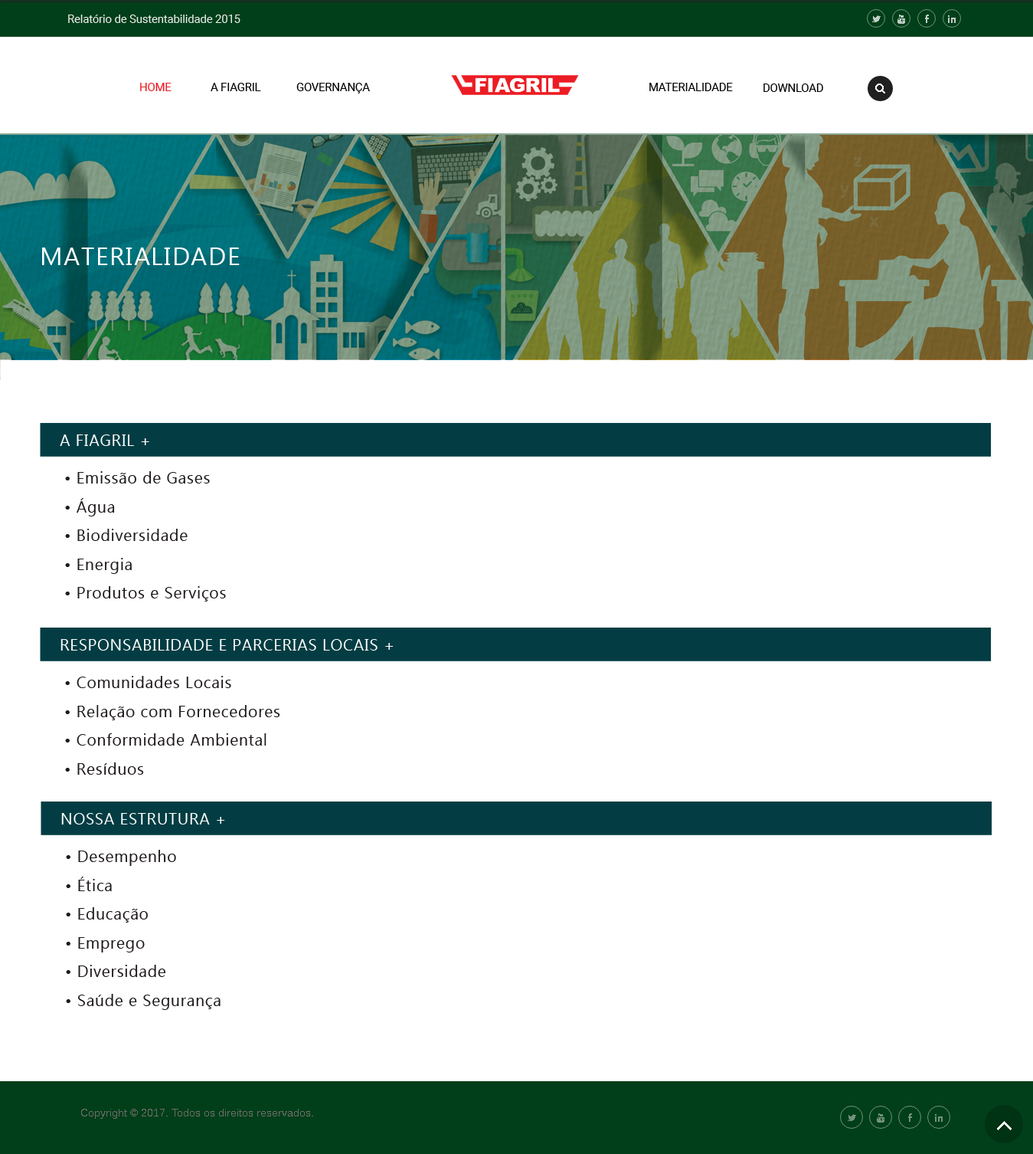
<style>
.page{position:relative;width:1033px;height:1154px;background:#ffffff}
.page>*{position:absolute;margin:0}
.t1{font:11.2px "Roboto-Regular";color:#ebebeb}
.t2{font:11.2px "Roboto-Regular";color:#ec1c24}
.t3{font:11.2px "Roboto-Regular";color:#010000}
.t4{font:25.5px "Ebrima";letter-spacing:0.04em;color:#ffffff}
.t5{font:16px "Ebrima";letter-spacing:0.04em;color:#ffffff}
.t6{font:16px/28.7px "Ebrima";letter-spacing:0.04em;color:#201b1b}
</style>
<div class="page">
<p class="t1" style="left:68px;top:15px;width:173px;height:8px">Relatório de Sustentabilidade 2015</p>
<p class="t2" style="left:140px;top:83px;width:32px;height:8px">HOME</p>
<p class="t3" style="left:211px;top:83px;width:50px;height:8px">A FIAGRIL</p>
<p class="t3" style="left:296px;top:83px;width:74px;height:10px">GOVERNANÇA</p>
<p class="t3" style="left:650px;top:83px;width:83px;height:8px">MATERIALIDADE</p>
<p class="t3" style="left:764px;top:84px;width:60px;height:8px">DOWNLOAD</p>
<p class="t4" style="left:42px;top:247px;width:198px;height:18px">MATERIALIDADE</p>
<p class="t5" style="left:60px;top:434px;width:89px;height:12px">A FIAGRIL +</p>
<p class="t6" style="left:65px;top:471px;width:161px;height:130px;text-align:justify">• Emissão de Gases<br>• Água<br>• Biodiversidade<br>• Energia<br>• Produtos e Serviços</p>
<p class="t5" style="left:61px;top:639px;width:333px;height:11px">RESPONSABILIDADE E PARCERIAS LOCAIS +</p>
<p class="t6" style="left:65px;top:676px;width:215px;height:99px;text-align:justify">• Comunidades Locais<br>• Relação com Fornecedores<br>• Conformidade Ambiental<br>• Resíduos</p>
<p class="t5" style="left:61px;top:813px;width:164px;height:11px">NOSSA ESTRUTURA +</p>
<p class="t6" style="left:66px;top:850px;width:155px;height:160px;text-align:justify">• Desempenho<br>• Ética<br>• Educação<br>• Emprego<br>• Diversidade<br>• Saúde e Segurança</p>
</div>
